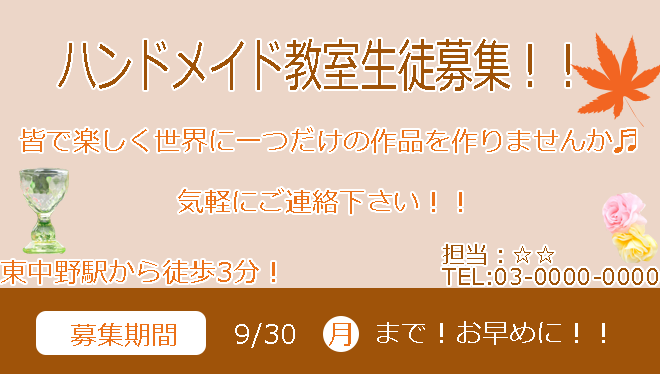
<style>
.page{position:relative;width:660px;height:374px;background:#ecd6c8}
.page>*{position:absolute;margin:0}
.t1{font:57.5px "Meiryo";color:#9f5309;scale:0.66 1}
.t2{font:27px "Meiryo";color:#eb7118}
.t3{font:23px "Meiryo";color:#9f5309}
.t4{font:27px "Meiryo";color:#ffffff}
</style>
<div class="page">
<p class="t1" style="left:58px;top:39px;width:512px;height:52px">ハンドメイド教室生徒募集！！</p>
<p class="t2" style="left:20px;top:127px;width:616px;height:26px">皆で楽しく世界に一つだけの作品を作りませんか♬</p>
<p class="t2" style="left:178px;top:188px;width:284px;height:26px">気軽にご連絡下さい！！</p>
<p class="t3" style="left:443px;top:244px;width:111px;height:21px">担当：☆☆</p>
<p class="t2" style="left:1px;top:260px;width:274px;height:24px">東中野駅から徒歩3分！</p>
<p class="t3" style="left:442px;top:268px;width:216px;height:17px">TEL:03-0000-0000</p>
<p class="t2" style="left:71px;top:323px;width:105px;height:24px">募集期間</p>
<p class="t4" style="left:235px;top:323px;width:60px;height:25px">9/30</p>
<p class="t2" style="left:329px;top:323px;width:22px;height:23px">月</p>
<p class="t4" style="left:377px;top:321px;width:228px;height:24px">まで！お早めに！！</p>
</div>
